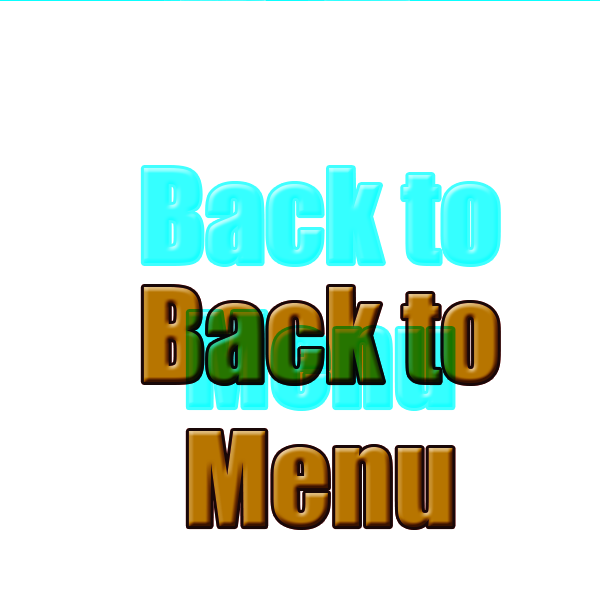
<style>
.page{position:relative;width:600px;height:600px;background:#ffffff}
.page>*{position:absolute;margin:0}
.t1{font:120px "Impact"}
</style>
<div class="page">
<p class="t1" style="left:143px;top:167px;width:355px;height:240px;text-align:center">Back to Menu</p>
</div>
